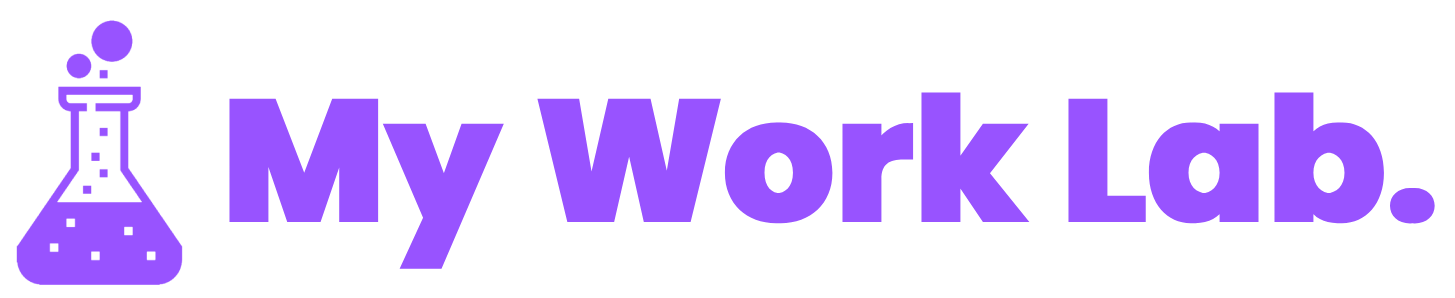
<style>
.page{position:relative;width:1455px;height:298px;background:#ffffff}
.page>*{position:absolute;margin:0}
.t1{font:175px "Poppins-ExtraBold";letter-spacing:-0.025em;color:#9853ff;font-weight:bold}
</style>
<div class="page">
<p class="t1" style="left:229px;top:92px;width:1206px;height:177px">My Work Lab.</p>
</div>
